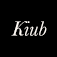
<style>
.page{position:relative;width:57px;height:57px;background:#000000}
.page>*{position:absolute;margin:0}
.t1{font:21.2px "Baskerville-Italic";color:#fffaf5}
</style>
<div class="page">
<p class="t1" style="left:11px;top:21px;width:36px;height:15px">Kiub</p>
</div>
